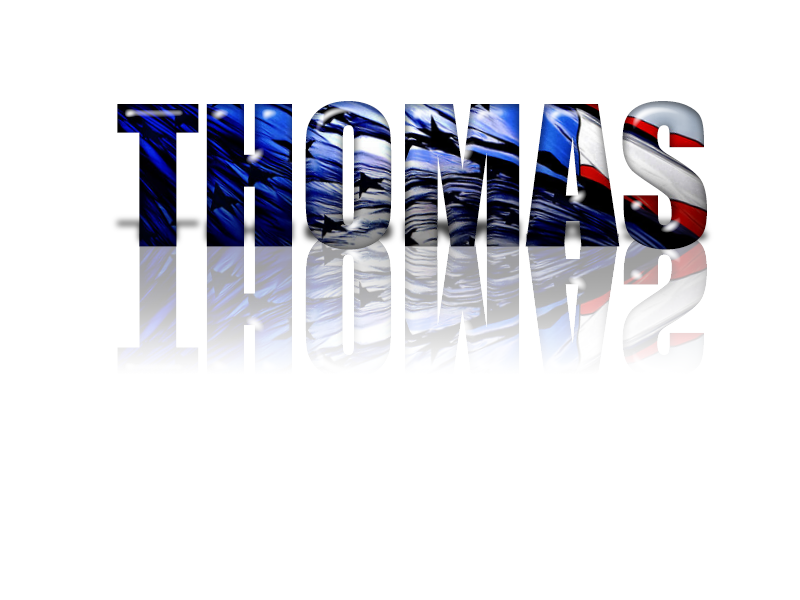
<style>
.page{position:relative;width:800px;height:600px;background:#ffffff}
.page>*{position:absolute;margin:0}
.t1{font:180px "Impact"}
</style>
<div class="page">
<p class="t1" style="left:117px;top:101px;width:590px;height:149px">THOMAS</p>
</div>
